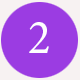
<style>
.page{position:relative;width:80px;height:80px;background:#9b3ce2}
.page>*{position:absolute;margin:0}
.t1{font:48px "MinionPro-Regular";color:#fefefe}
</style>
<div class="page">
<p class="t1" style="left:29px;top:22px;width:20px;height:31px">2</p>
</div>
